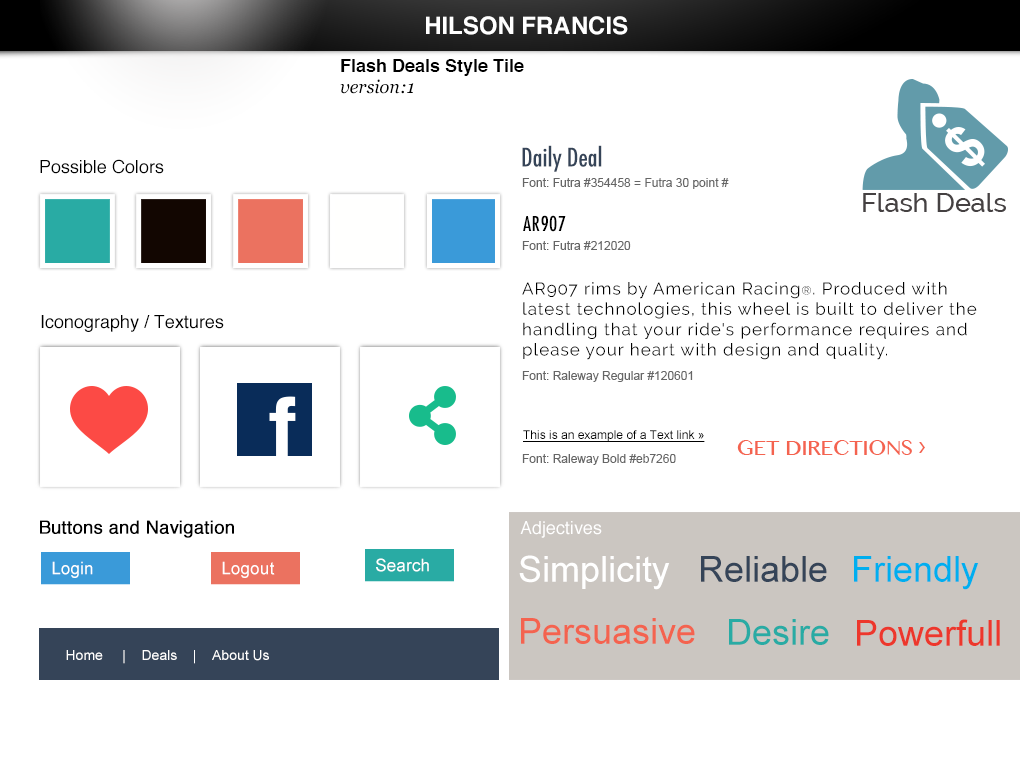
<style>
.page{position:relative;width:1020px;height:760px;background:#ffffff}
.page>*{position:absolute;margin:0}
.t1{font:24px "Helvetica-Bold";color:#ffffff}
.t2{font:18px "Helvetica-Bold";color:#000000}
.t3{font:18px "Georgia-Italic";color:#000000}
.t4{font:25px "Futura-CondensedMedium";color:#354458}
.t5{font:18px "Helvetica";color:#000000}
.t6{font:12px "ArialMT";color:#666666}
.t7{font:20px "Futura-CondensedMedium";letter-spacing:0.02em;color:#000000}
.t8{font:17px "Raleway-Regular";letter-spacing:0.06em;color:#000000}
.t9{font:12px "Raleway-Regular";letter-spacing:0.06em;color:#000000}
.t10{font:12px "ArialMT";color:#000000;text-decoration:underline}
.t11{font:20.5px "LaoMN";color:#f4634f}
.t12{font:30px "MyriadPro-Regular";color:#f4634f}
.t13{font:18px "Helvetica";color:#000000;font-weight:bold}
.t14{font:18px "Helvetica";color:#ffffff}
.t15{font:17.2px "ArialMT";color:#ffffff}
.t16{font:36px "ArialMT";color:#ffffff}
.t17{font:36px "ArialMT";color:#354458}
.t18{font:36px "ArialMT";color:#00aeef}
.t19{font:36px "ArialMT";color:#f4634f}
.t20{font:36px "ArialMT";color:#29aba4}
.t21{font:36px "ArialMT";color:#ed372c}
.t22{font:14px "ArialMT";color:#ffffff}
</style>
<div class="page">
<p class="t1" style="left:426px;top:16px;width:202px;height:19px">HILSON FRANCIS</p>
<p class="t2" style="left:341px;top:59px;width:183px;height:17px">Flash Deals Style Tile</p>
<p class="t3" style="left:340px;top:79px;width:74px;height:15px">version:1</p>
<p class="t4" style="left:522px;top:145px;width:80px;height:27px">Daily Deal</p>
<p class="t5" style="left:40px;top:159px;width:124px;height:15px">Possible Colors</p>
<p class="t6" style="left:522px;top:178px;width:207px;height:11px">Font: Futra #354458 = Futra 30 point #</p>
<p class="t7" style="left:523px;top:215px;width:43px;height:17px">AR907</p>
<p class="t6" style="left:522px;top:241px;width:109px;height:9px">Font: Futra #212020</p>
<p class="t8" style="left:522px;top:282px;width:455px;height:78px">AR907 rims by American Racing<span class="t9">®</span>. Produced with latest technologies, this wheel is built to deliver the handling that your ride's performance requires and please your heart with design and quality.</p>
<p class="t5" style="left:41px;top:315px;width:183px;height:17px">Iconography / Textures</p>
<p class="t6" style="left:522px;top:371px;width:171px;height:11px">Font: Raleway Regular #120601</p>
<p class="t10" style="left:523px;top:430px;width:182px;height:12px">This is an example of a Text link »</p>
<p class="t11" style="left:737px;top:440px;width:188px;height:15px">GET DIRECTIONS <span class="t12">›</span></p>
<p class="t6" style="left:522px;top:454px;width:154px;height:11px">Font: Raleway Bold #eb7260</p>
<p class="t13" style="left:40px;top:520px;width:194px;height:18px">Buttons and Navigation</p>
<p class="t14" style="left:520px;top:521px;width:82px;height:17px">Adjectives</p>
<p class="t15" style="left:376px;top:558px;width:53px;height:14px">Search</p>
<p class="t16" style="left:519px;top:555px;width:151px;height:35px">Simplicity</p>
<p class="t17" style="left:701px;top:556px;width:126px;height:26px">Reliable</p>
<p class="t18" style="left:854px;top:556px;width:125px;height:34px">Friendly</p>
<p class="t15" style="left:52px;top:561px;width:41px;height:17px">Login</p>
<p class="t15" style="left:222px;top:561px;width:53px;height:17px">Logout</p>
<p class="t19" style="left:521px;top:618px;width:174px;height:26px">Persuasive</p>
<p class="t20" style="left:729px;top:619px;width:100px;height:26px">Desire</p>
<p class="t21" style="left:857px;top:619px;width:143px;height:27px">Powerfull</p>
<p class="t22" style="left:66px;top:650px;width:203px;height:14px">Home     |    Deals    |    About Us</p>
</div>
